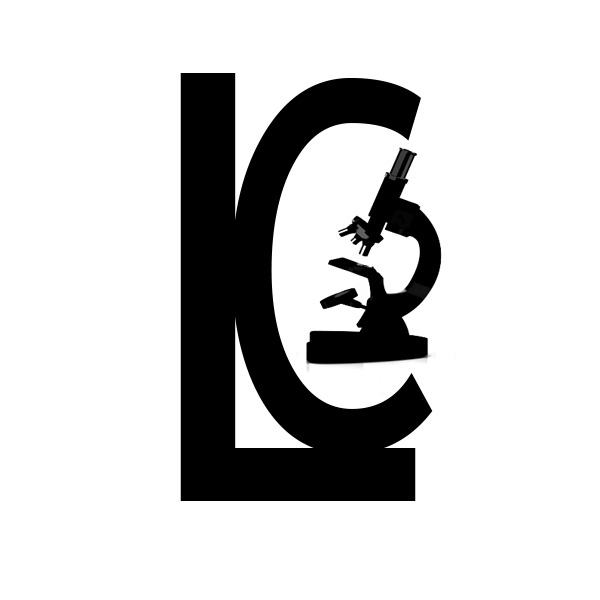
<style>
.page{position:relative;width:600px;height:600px;background:#ffffff}
.page>*{position:absolute;margin:0}
.t1{font:599.2px "TrebuchetMS";color:#000000;scale:0.93 1}
.t2{font:509px "TrebuchetMS";color:#000000;scale:0.76 1}
</style>
<div class="page">
<p class="t1" style="left:180px;top:73px;width:236px;height:428px">L</p>
<p class="t2" style="left:232px;top:78px;width:201px;height:376px">C</p>
</div>
